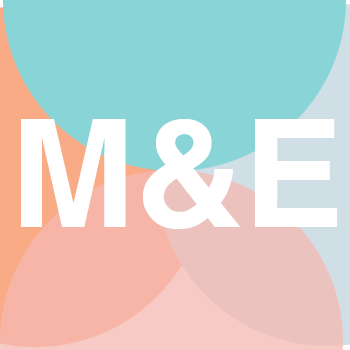
<style>
.page{position:relative;width:350px;height:350px;background:#88d4d7}
.page>*{position:absolute;margin:0}
.t1{font:150px "Helvetica-Bold";color:#ffffff}
</style>
<div class="page">
<p class="t1" style="left:21px;top:119px;width:316px;height:110px">M&amp;E</p>
</div>
